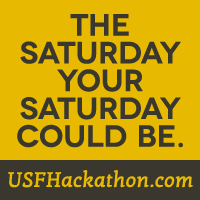
<style>
.page{position:relative;width:200px;height:200px;background:#e8b901}
.page>*{position:absolute;margin:0}
.t1{font:30.5px/27.8px "Novecentowide-DemiBold";color:#39372e;text-transform:uppercase}
.t2{font:20.5px "KottaOne-Regular";letter-spacing:0.02em;color:#e8b901;font-weight:bold}
</style>
<div class="page">
<p class="t1" style="left:17px;top:14px;width:166px;height:134px;text-align:center">THE<br>Saturday Your SatuRday Could Be.</p>
<p class="t2" style="left:8px;top:170px;width:185px;height:18px">USFHackathon.com</p>
</div>
